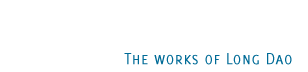
<style>
.page{position:relative;width:308px;height:72px;background:#ffffff}
.page>*{position:absolute;margin:0}
.t1{font:18px "Delicious-SmallCaps";color:#006b97}
</style>
<div class="page">
<p class="t1" style="left:124px;top:53px;width:168px;height:12px">The works of Long Dao</p>
</div>
